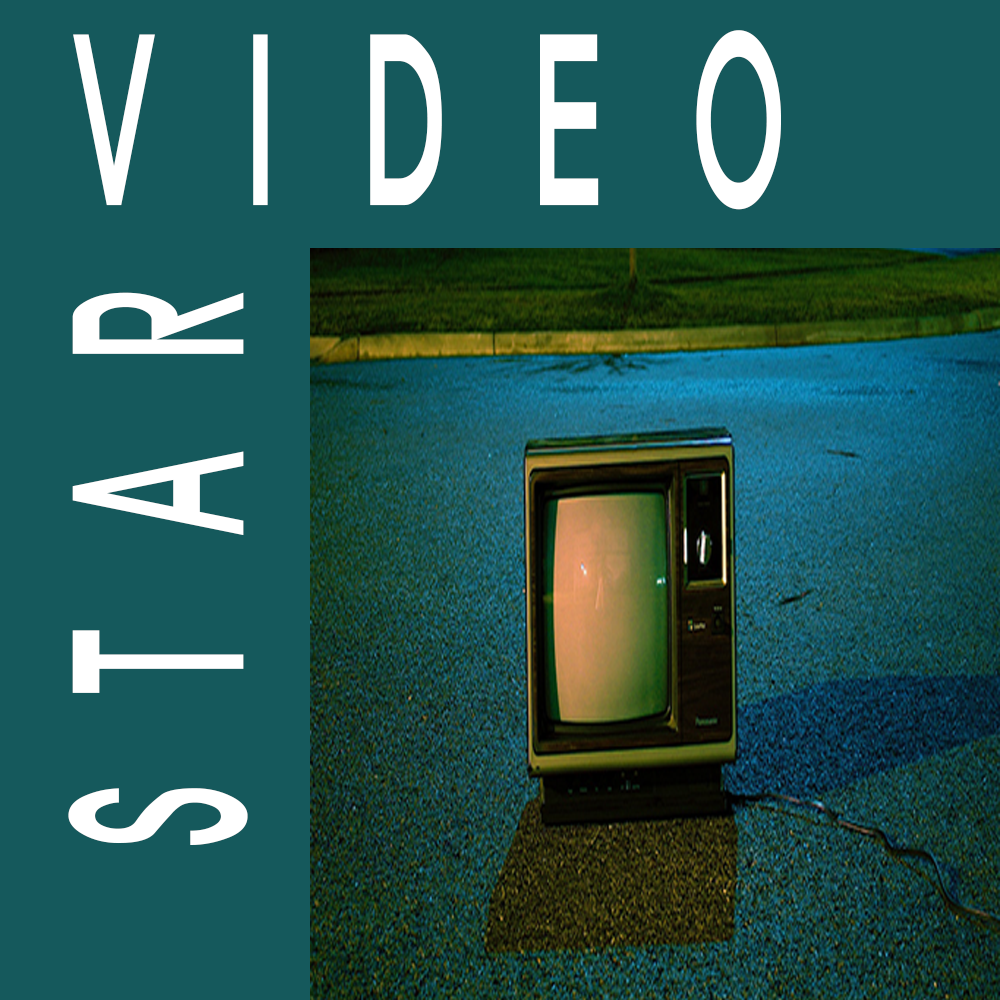
<style>
.page{position:relative;width:1000px;height:1000px;background:#15595c}
.page>*{position:absolute;margin:0}
.t1{font:102px "ExpoM-HM";letter-spacing:0.9em;color:#ffffff;scale:2.14 1}
</style>
<div class="page">
<p class="t1" style="left:73px;top:30px;width:708px;height:180px;rotate:-90deg">VIDEO</p>
<p class="t1" style="left:68px;top:292px;width:180px;height:553px;rotate:180deg">STAR</p>
</div>
